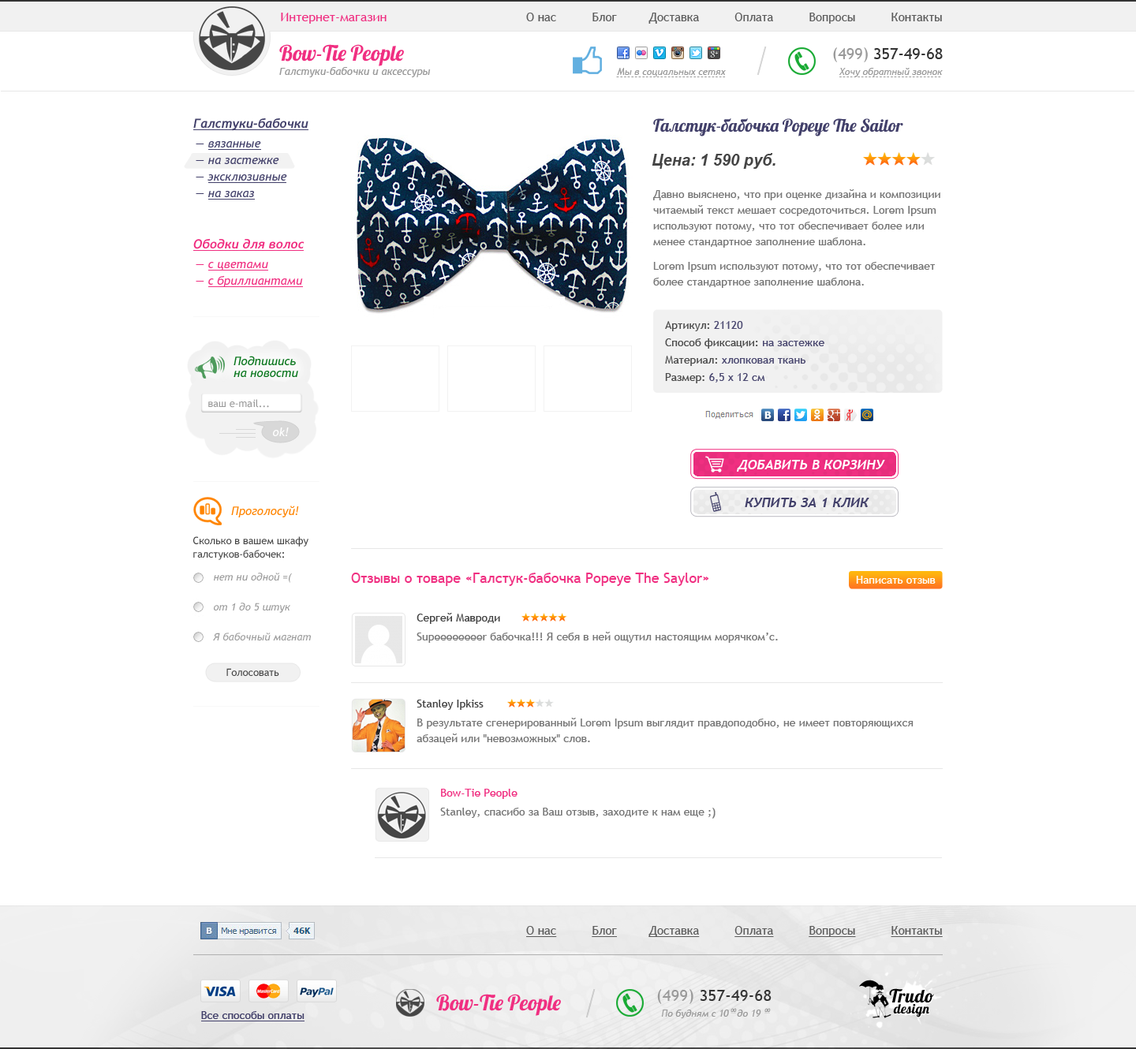
<style>
.page{position:relative;width:1136px;height:1049px;background:#ffffff}
.page>*{position:absolute;margin:0}
.t1{font:12.6px "Trebuchet-BoldItalic";color:#42406a}
.t2{font:17.4px "Lobster";color:#42406a}
.t3{font:11.8px/16.6px "TrebuchetMS-Italic";color:#42406a}
.t4{font:15.8px "Arial-BoldItalicMT";color:#454545}
.t5{font:11px/15.8px "TrebuchetMS";color:#777777}
.t6{font:12.6px "Trebuchet-BoldItalic";color:#f02f81}
.t7{font:11.8px/16.6px "TrebuchetMS-Italic";color:#f02f81}
.t8{font:11px/17.4px "TrebuchetMS";color:#454545}
.t9{font:11px/17.4px "TrebuchetMS";color:#42406a}
.t10{font:11.8px/11.8px "TrebuchetMS-Italic";color:#06741a}
.t11{font:10.3px "TrebuchetMS";color:#999999}
.t12{font:11.8px "TrebuchetMS-Italic";color:#ffffff}
.t13{font:13.4px "Trebuchet-BoldItalic";color:#ffffff;text-transform:uppercase}
.t14{font:13.4px "Trebuchet-BoldItalic";color:#42406a;text-transform:uppercase}
.t15{font:11.8px "TrebuchetMS-Italic";color:#ff8400}
.t16{font:10.3px/13.4px "TrebuchetMS";color:#454545}
.t17{font:10.3px/30px "TrebuchetMS-Italic";color:#999999}
.t18{font:14.2px "TrebuchetMS";color:#f02f81}
.t19{font:11px "TrebuchetMS";color:#ffffff}
.t20{font:11px "TrebuchetMS";color:#454545}
.t21{font:11px "TrebuchetMS";color:#777777}
.t22{font:10.3px "TrebuchetMS";color:#454545}
.t23{font:11px "TrebuchetMS";color:#f02f81}
</style>
<div class="page">
<p class="t1" style="left:193px;top:118px;width:116px;height:13px">Галстуки-бабочки</p>
<p class="t2" style="left:653px;top:118px;width:250px;height:19px">Галстук-бабочка Popeye The Sailor</p>
<p class="t3" style="left:196px;top:141px;width:91px;height:56px">— вязанные<br>— на застежке<br>— эксклюзивные<br>— на заказ</p>
<p class="t4" style="left:652px;top:153px;width:124px;height:16px">Цена: 1 590 руб.</p>
<p class="t5" style="left:653px;top:189px;width:288px;height:59px">Давно выяснено, что при оценке дизайна и композиции <br>читаемый текст мешает сосредоточиться. Lorem Ipsum <br>используют потому, что тот обеспечивает более или <br>менее стандартное заполнение шаблона.</p>
<p class="t6" style="left:193px;top:238px;width:112px;height:11px">Ободки для волос</p>
<p class="t7" style="left:196px;top:262px;width:107px;height:25px">— с цветами<br>— с бриллиантами</p>
<p class="t5" style="left:653px;top:262px;width:282px;height:26px">Lorem Ipsum используют потому, что тот обеспечивает <br>более стандартное заполнение шаблона.</p>
<p class="t8" style="left:665px;top:321px;width:160px;height:62px;opacity:0.95">Артикул: <span class="t9">21120<br></span>Способ фиксации: <span class="t9">на застежке<br></span>Материал: <span class="t9">хлопковая ткань<br></span>Размер: <span class="t9">6,5 х 12 см</span></p>
<p class="t10" style="left:234px;top:356px;width:64px;height:21px">Подпишись<br>на новости</p>
<p class="t11" style="left:208px;top:399px;width:61px;height:9px">ваш e-mail...</p>
<p class="t12" style="left:273px;top:428px;width:16px;height:8px">ok!</p>
<p class="t13" style="left:737px;top:460px;width:148px;height:12px">Добавить в корзину</p>
<p class="t14" style="left:745px;top:498px;width:125px;height:9px">КУПИТЬ ЗА 1 КЛИК</p>
<p class="t15" style="left:231px;top:506px;width:68px;height:12px">Проголосуй!</p>
<p class="t16" style="left:193px;top:537px;width:116px;height:23px">Сколько в вашем шкафу<br>галстуков-бабочек:</p>
<p class="t17" style="left:213px;top:573px;width:98px;height:68px">нет ни одной =(<br>от 1 до 5 штук<br>Я бабочный магнат</p>
<p class="t18" style="left:351px;top:573px;width:358px;height:13px">Отзывы о товаре «Галстук-бабочка Popeye The Saylor»</p>
<p class="t19" style="left:856px;top:576px;width:80px;height:8px">Написать отзыв</p>
<p class="t20" style="left:417px;top:613px;width:83px;height:11px">Сергей Мавроди</p>
<p class="t21" style="left:417px;top:632px;width:361px;height:11px">Supeeeeeeeer бабочка!!! Я себя в ней ощутил настоящим морячком’c.</p>
<p class="t22" style="left:226px;top:668px;width:53px;height:8px">Голосовать</p>
<p class="t20" style="left:417px;top:700px;width:67px;height:10px">Stanley Ipkiss</p>
<p class="t5" style="left:417px;top:718px;width:497px;height:26px">В результате сгенерированный Lorem Ipsum выглядит правдоподобно, не имеет повторяющихся <br>абзацей или "невозможных" слов.</p>
<p class="t23" style="left:441px;top:789px;width:77px;height:10px">Bow-Tie People</p>
<p class="t21" style="left:440px;top:808px;width:276px;height:11px">Stanley, cпасибо за Ваш отзыв, заходите к нам еще ;)</p>
</div>
